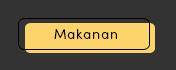
<style>
.page{position:relative;width:176px;height:70px;background:#333333}
.page>*{position:absolute;margin:0}
.t1{font:13.3px "SofiaProLight";letter-spacing:0.079em;color:#000000}
</style>
<div class="page">
<p class="t1" style="left:54px;top:29px;width:63px;height:10px">Makanan</p>
</div>
